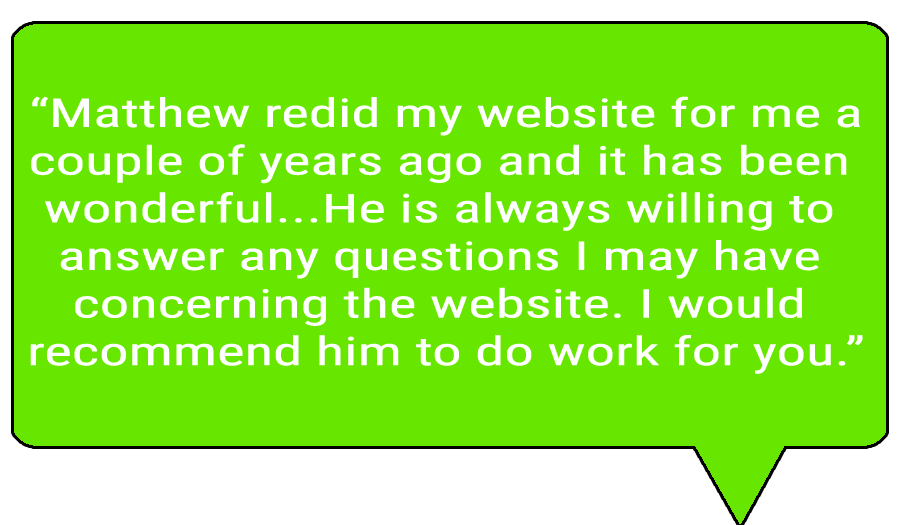
<style>
.page{position:relative;width:900px;height:525px;background:#67e600}
.page>*{position:absolute;margin:0}
.t1{font:39.7px "RobotoCondensed-Regular";color:#ffffff;scale:1.48 1}
</style>
<div class="page">
<p class="t1" style="left:30px;top:96px;width:833px;height:278px;text-align:center">“Matthew redid my website for me a<br>couple of years ago and it has been <br>wonderful...He is always willing to <br>answer any questions I may have <br>concerning the website. I would <br>recommend him to do work for you.”</p>
</div>
